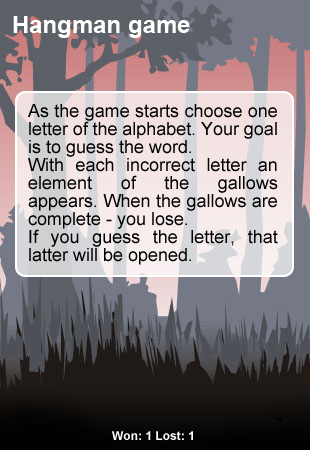
<style>
.page{position:relative;width:310px;height:450px}
.page>*{position:absolute;margin:0}
.t1{font:24px "Arial-BoldMT";color:#ffffff}
.t2{font:18px/18px "ArialMT";color:#010101}
.t3{font:12px "Arial-BoldMT";color:#ffffff}
</style>
<div class="page">
<p class="t1" style="left:13px;top:16px;width:177px;height:22px">Hangman game</p>
<p class="t2" style="left:28px;top:104px;width:250px;height:161px;text-align:justify">As the game starts choose one letter of the alphabet. Your goal is to guess the word.<br>With each incorrect letter an element of the gallows appears. When the gallows are complete - you lose.<br>If you guess the letter, that latter will be opened.</p>
<p class="t3" style="left:112px;top:431px;width:81px;height:9px">Won: 1 Lost: 1</p>
</div>
